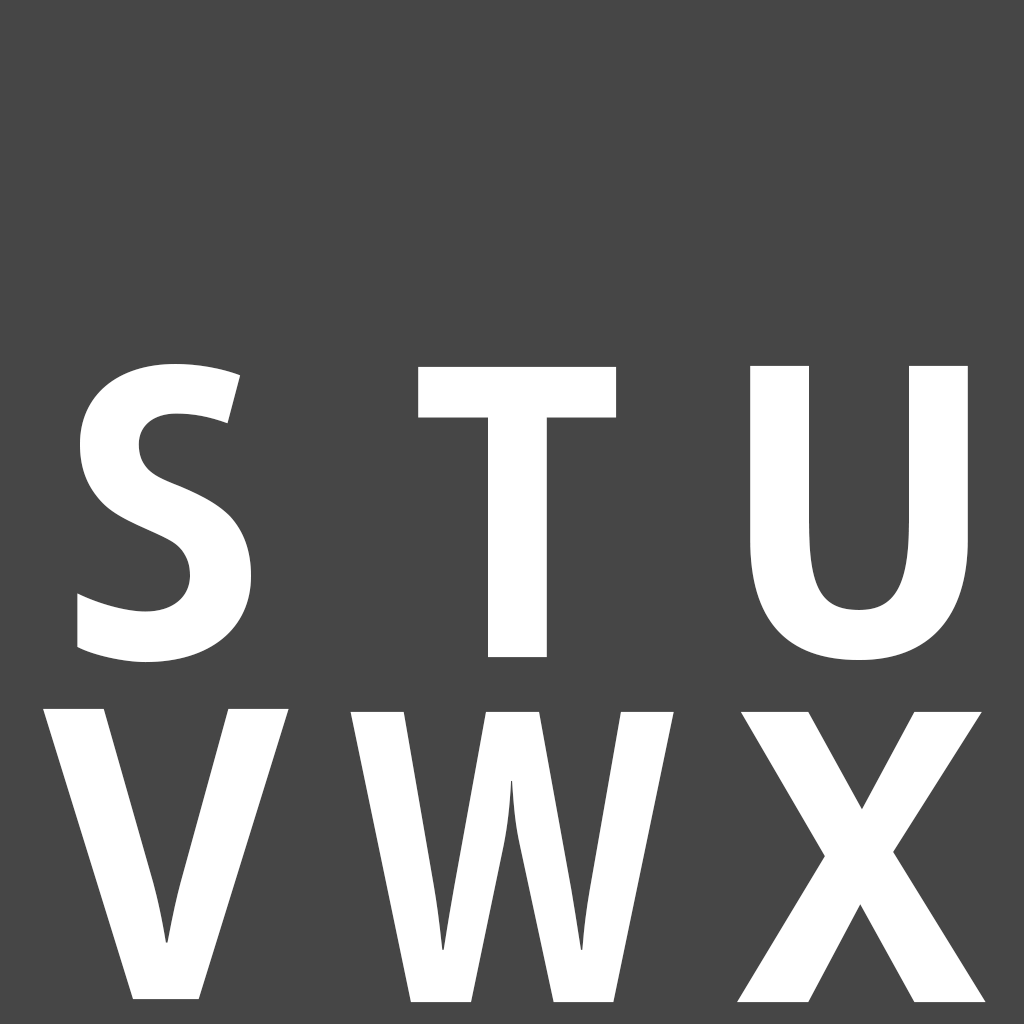
<style>
.page{position:relative;width:1024px;height:1024px;background:#464646}
.page>*{position:absolute;margin:0}
.t1{font:420px "SemikolonPlus-Bold";color:#ffffff}
.t2{font:420px "SemikolonPlus-Bold";color:#ffffff;scale:0.88 1}
</style>
<div class="page">
<p class="t1" style="left:77px;top:364px;width:174px;height:299px">S</p>
<p class="t1" style="left:418px;top:366px;width:199px;height:292px">T</p>
<p class="t1" style="left:750px;top:365px;width:218px;height:295px">U</p>
<p class="t1" style="left:43px;top:708px;width:246px;height:292px">V</p>
<p class="t2" style="left:350px;top:711px;width:324px;height:292px">W</p>
<p class="t1" style="left:737px;top:711px;width:249px;height:292px">X</p>
</div>
